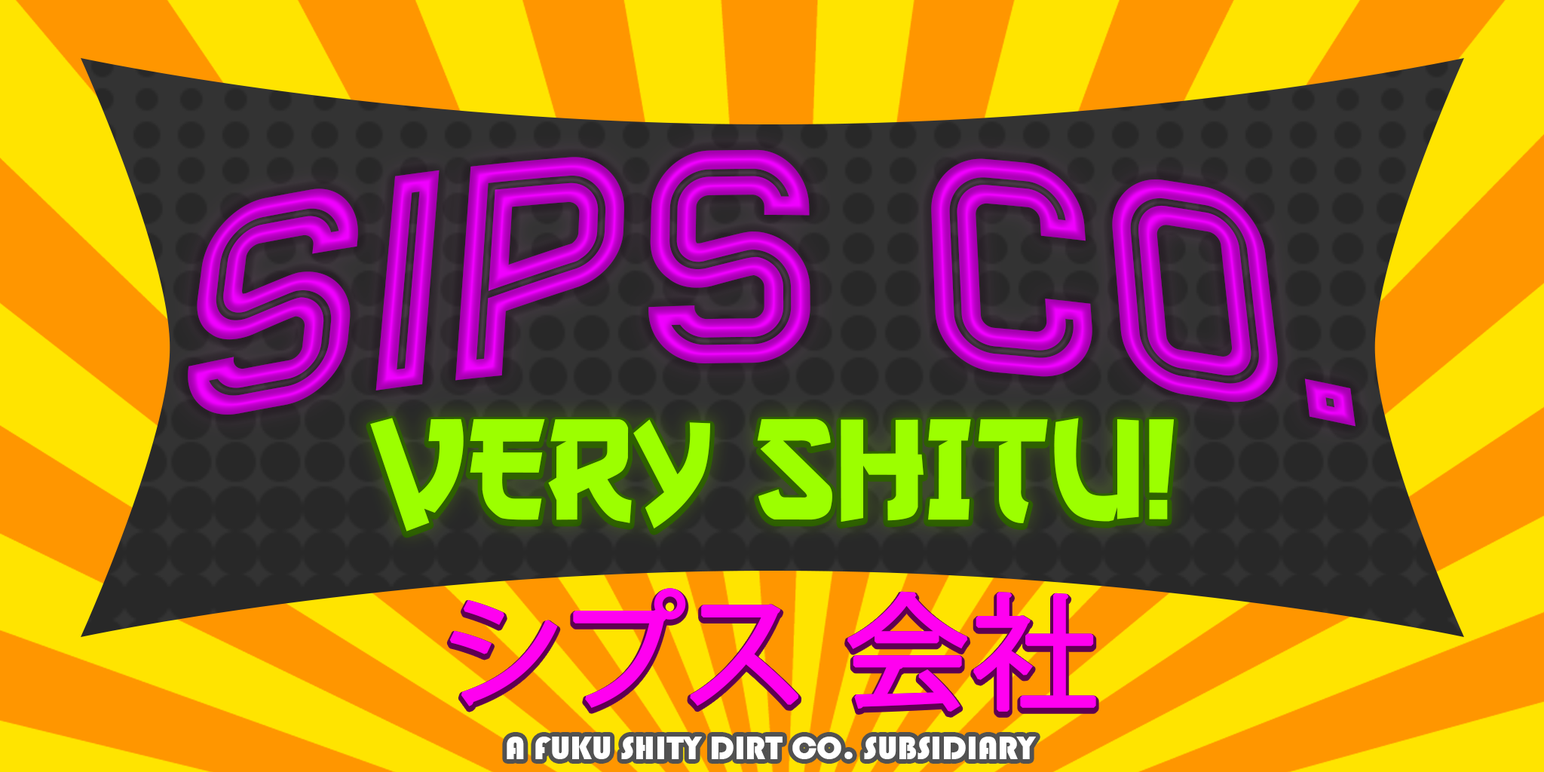
<style>
.page{position:relative;width:1544px;height:772px;background:#ff9600}
.page>*{position:absolute;margin:0}
.t1{font:360.1px "Bender-Inline";text-transform:uppercase}
.t2{font:150.8px "GangofThree";color:#9cff00;text-transform:uppercase}
.t3{font:124.2px "KozGoPr6N-Regular";color:#ff00f0;text-transform:uppercase;font-weight:bold}
.t4{font:33.8px "Bauhaus93";color:#ffffff;text-transform:uppercase}
</style>
<div class="page">
<p class="t1" style="left:188px;top:149px;width:1168px;height:278px">Sips co.</p>
<p class="t2" style="left:370px;top:418px;width:804px;height:114px">VERY SHITU!</p>
<p class="t3" style="left:449px;top:588px;width:647px;height:124px">シプス 会社</p>
<p class="t4" style="left:507px;top:737px;width:529px;height:22px">A fuku shity dirt co. subsidiary</p>
</div>
